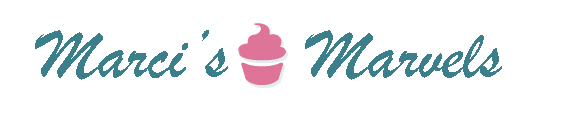
<style>
.page{position:relative;width:567px;height:121px;background:#ffffff}
.page>*{position:absolute;margin:0}
.t1{font:72px "BrushScriptMT";color:#3b7f8b}
</style>
<div class="page">
<p class="t1" style="left:35px;top:30px;width:467px;height:50px">Marci’s    Marvels</p>
</div>
